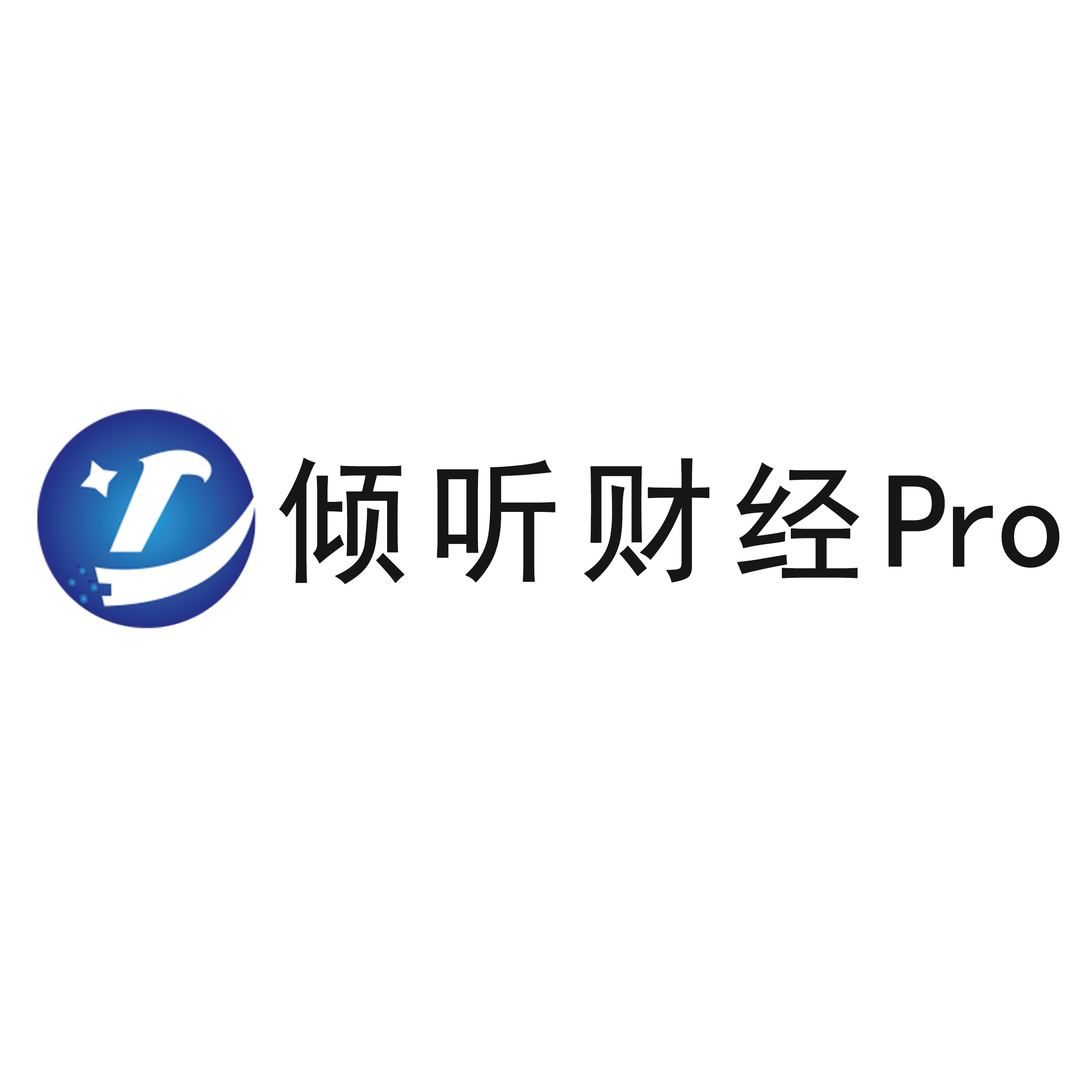
<style>
.page{position:relative;width:1092px;height:1092px;background:#ffffff}
.page>*{position:absolute;margin:0}
.t1{font:134.8px "SimHei";letter-spacing:0.1em;color:#161616;font-weight:bold}
.t2{font:134.8px "SimHei";letter-spacing:-0.1em;color:#161616;font-weight:bold}
</style>
<div class="page">
<p class="t1" style="left:279px;top:458px;width:781px;height:126px">倾听财经<span class="t2">Pro</span></p>
</div>
